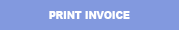
<style>
.page{position:relative;width:179px;height:30px;background:#8299df}
.page>*{position:absolute;margin:0}
.t1{font:18.2px "Arial-Black";color:#ffffff;scale:0.9 1}
</style>
<div class="page">
<p class="t1" style="left:49px;top:11px;width:81px;height:8px">PRINT INVOICE</p>
</div>
